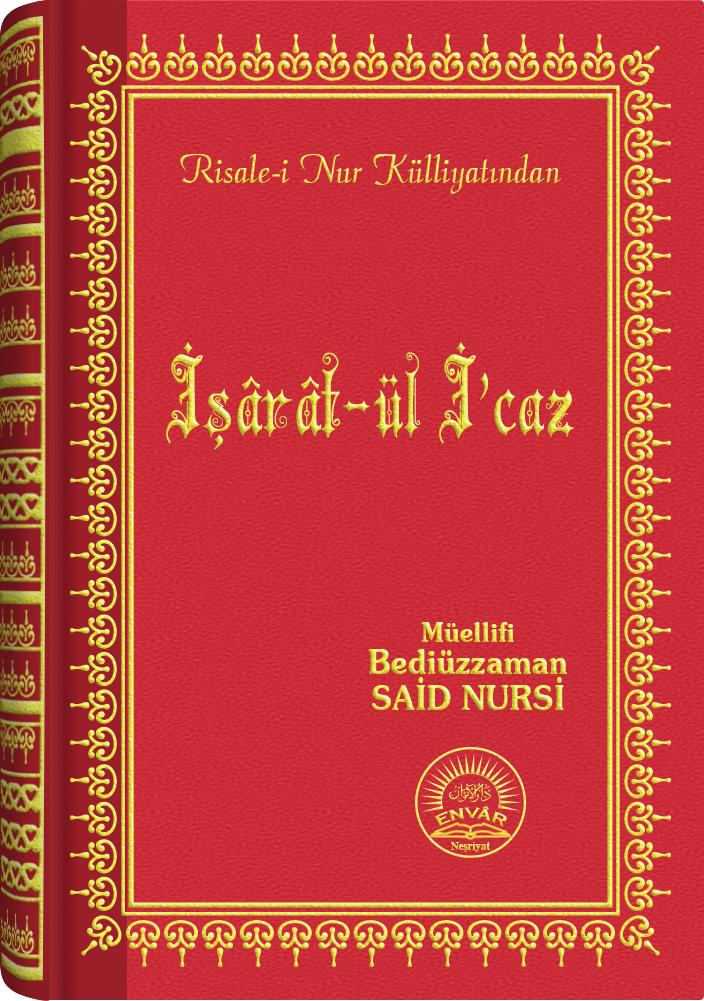
<style>
.page{position:relative;width:704px;height:1001px}
.page>*{position:absolute;margin:0}
.t1{font:45.3px "Barla © 072 Aria ScriptScriptSSi";scale:0.94 1}
.t2{font:103.9px "Barla © 001 Liva Nur";letter-spacing:-0.001em;scale:0.92 1}
.t3{font:33.4px/32.4px "SouvenirITCbyBT-Demi";scale:0.93 1}
.t4{font:27.4px/24.4px "SouvenirITCbyBT-Demi";scale:0.93 1}
.t5{font:33.4px/36.4px "SouvenirITCbyBT-Demi";scale:0.93 1}
.t6{font:15.6px "CopperplateGothic-Bold"}
.t7{font:11.2px "Times-Bold";scale:0.96 1}
</style>
<div class="page">
<p class="t1" style="left:180px;top:154px;width:381px;height:40px">Risale-i Nur Külliyatından</p>
<p class="t2" style="left:166px;top:342px;width:408px;height:108px">İşârât-ül İ’caz</p>
<p class="t3" style="left:369px;top:622px;width:198px;height:88px;text-align:center"><span class="t4">Müellifi<br></span>Bediüzzaman<br><span class="t5">SAİD NURSİ</span></p>
<p class="t6" style="left:434px;top:806px;width:73px;height:21px">ENVÂR</p>
<p class="t7" style="left:451px;top:842px;width:39px;height:10px">Neşriyat</p>
</div>
